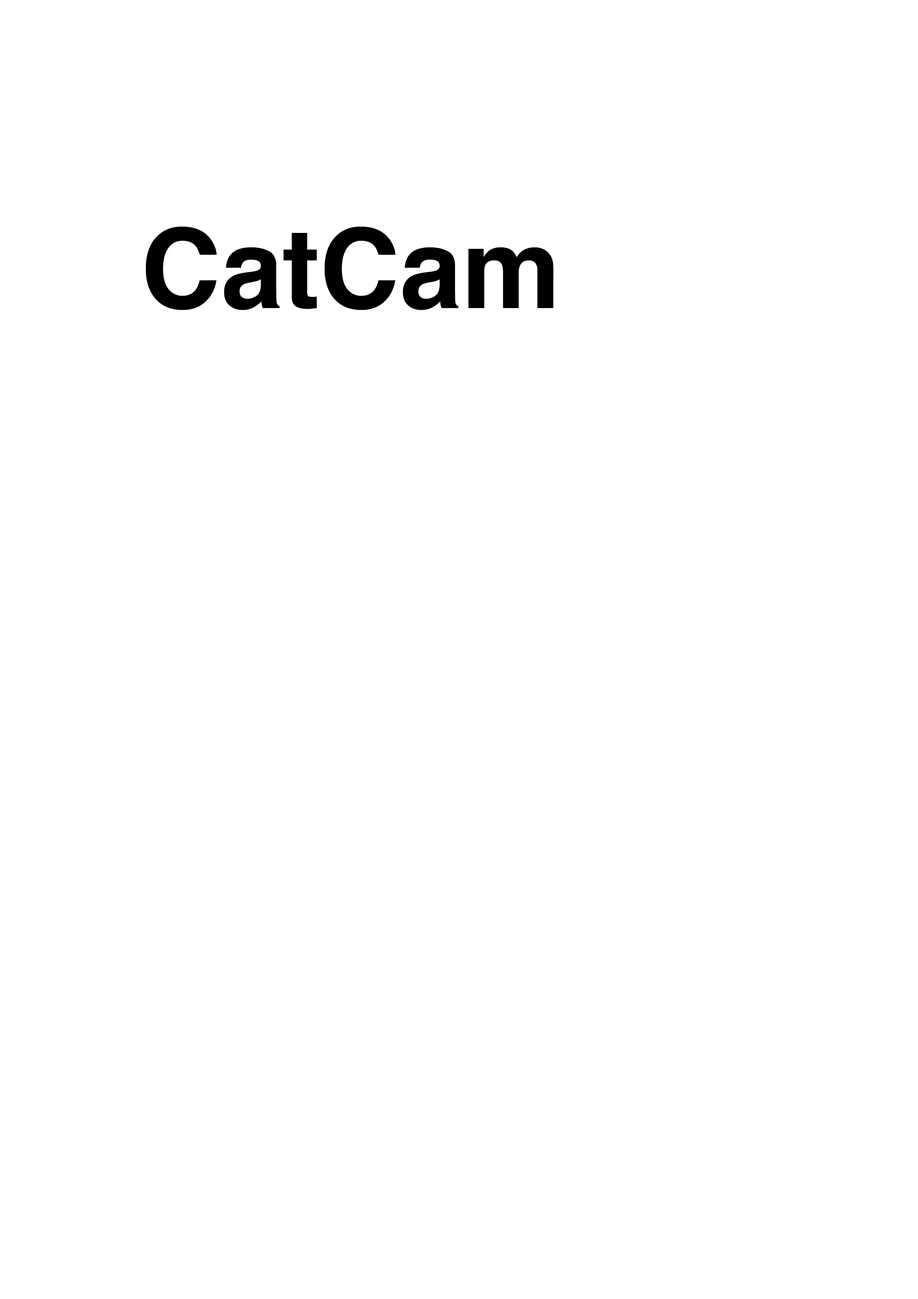
<style>
.page{position:relative;width:918px;height:1299px;background:#ffffff}
.page>*{position:absolute;margin:0}
.t1{font:111.1px "Helvetica-Bold";color:#000000}
</style>
<div class="page">
<p class="t1" style="left:146px;top:227px;width:407px;height:83px">CatCam</p>
</div>
